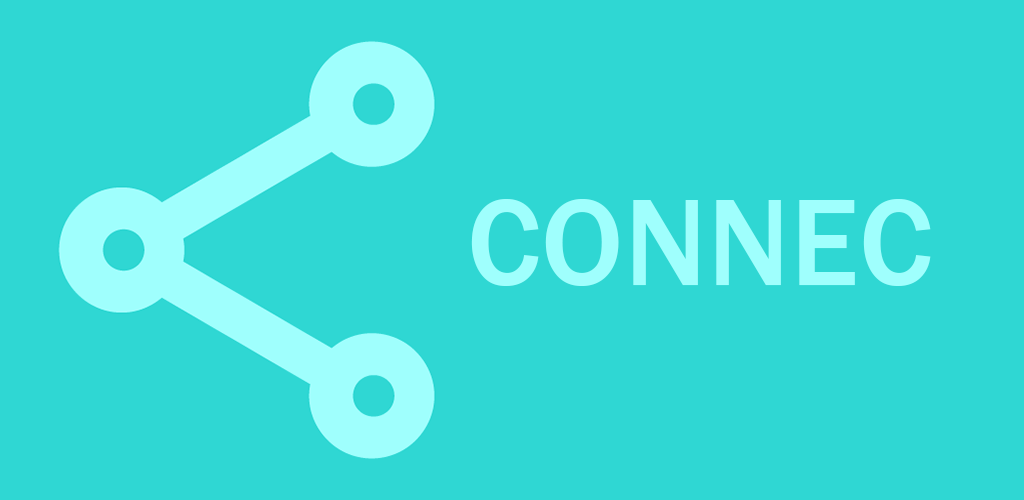
<style>
.page{position:relative;width:1024px;height:500px;background:#2fd7d3}
.page>*{position:absolute;margin:0}
.t1{font:128px "FranklinGothic-Medium";color:#9ffffd}
</style>
<div class="page">
<p class="t1" style="left:471px;top:199px;width:460px;height:87px">CONNEC</p>
</div>
